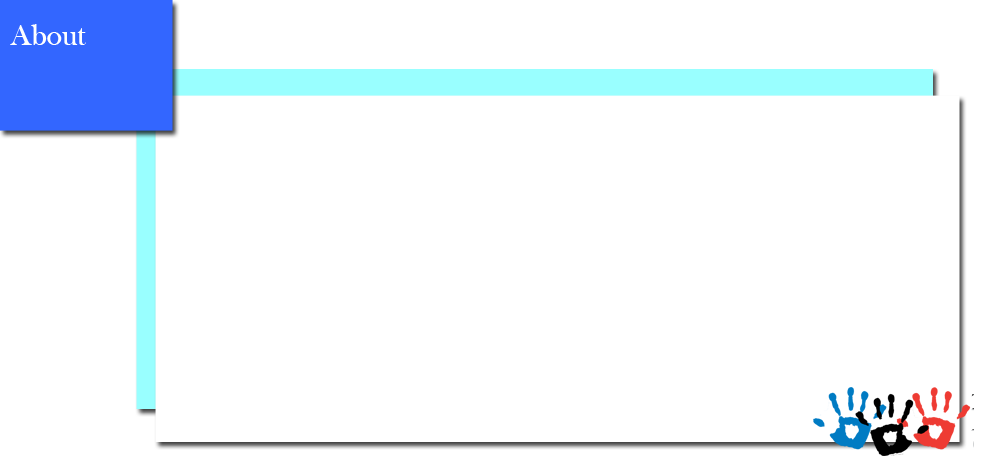
<style>
.page{position:relative;width:996px;height:456px;background:#ffffff}
.page>*{position:absolute;margin:0}
.t1{font:30px "BaskOldFace";color:#ffffff}
</style>
<div class="page">
<p class="t1" style="left:10px;top:24px;width:76px;height:21px">About</p>
</div>
